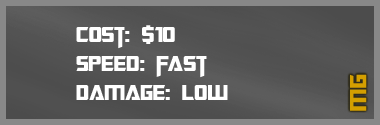
<style>
.page{position:relative;width:380px;height:125px}
.page>*{position:absolute;margin:0}
.t1{font:24px "TransformersMovie";color:#ffffff}
.t2{font:24px "TransformersMovie";letter-spacing:0.04em;color:#ffffff}
.t3{font:24px "TransformersMovie";letter-spacing:-0.06em;color:#ffffff}
.t4{font:26px "TransformersMovie";letter-spacing:0.06em;color:#d49f00}
</style>
<div class="page">
<p class="t1" style="left:76px;top:25px;width:152px;height:75px">Cost: $10<br>Spee<span class="t2">d</span>: <span class="t3">f</span>ast<br>Damage: low</p>
<p class="t4" style="left:350px;top:74px;width:17px;height:37px;rotate:-90deg">mg</p>
</div>
